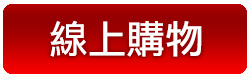
<style>
.page{position:relative;width:250px;height:80px;background:#ffffff}
.page>*{position:absolute;margin:0}
.t1{font:38.6px "LiHeiPro";color:#ffffff}
</style>
<div class="page">
<p class="t1" style="left:50px;top:20px;width:152px;height:37px">線上購物</p>
</div>
